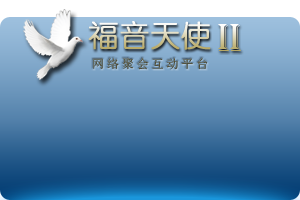
<style>
.page{position:relative;width:300px;height:200px}
.page>*{position:absolute;margin:0}
.t1{font:30px "YouYuan";font-weight:bold}
.t2{font:40px "Algerian"}
.t3{font:12px "SimSun";letter-spacing:0.24em}
</style>
<div class="page">
<p class="t1" style="left:88px;top:21px;width:123px;height:29px">福音天使</p>
<p class="t2" style="left:218px;top:24px;width:23px;height:27px">II</p>
<p class="t3" style="left:93px;top:58px;width:115px;height:12px">网络聚会互动平台</p>
</div>
